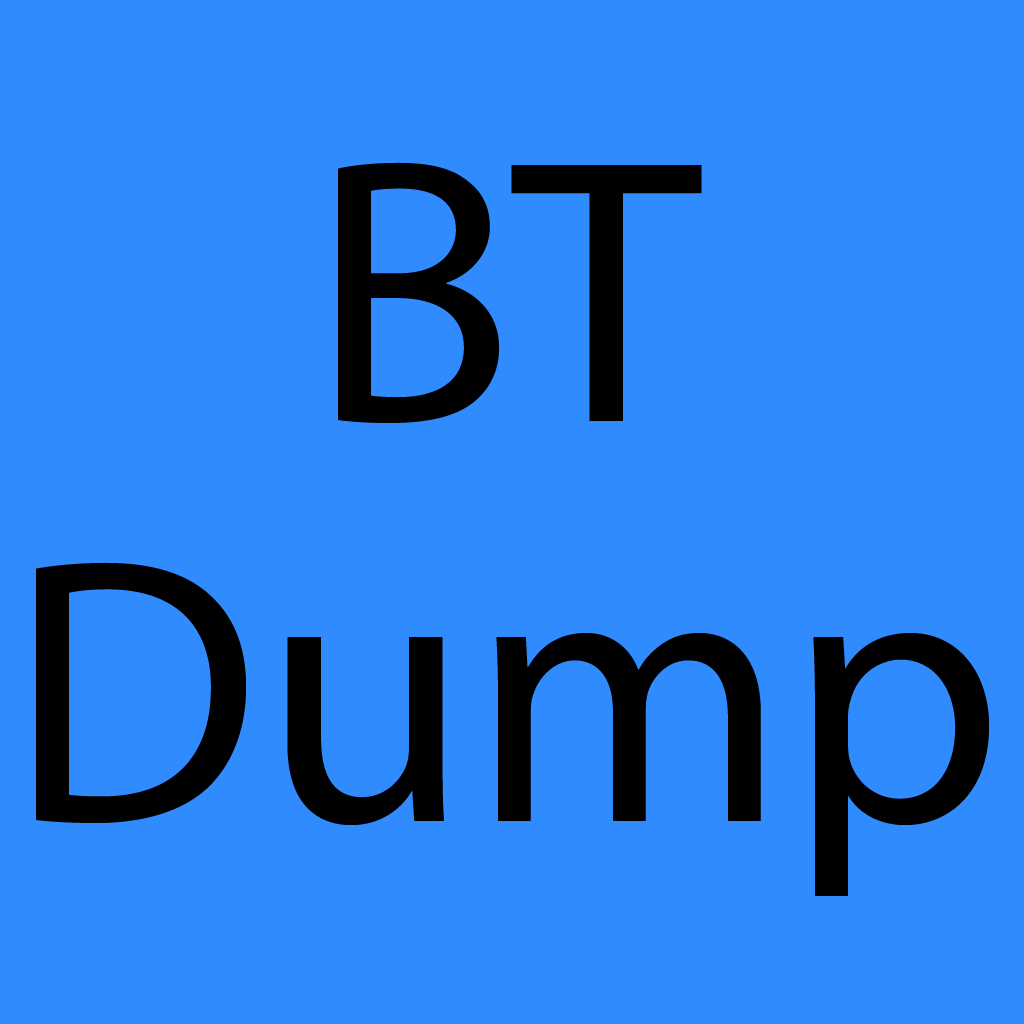
<style>
.page{position:relative;width:1024px;height:1024px;background:#2f8bfe}
.page>*{position:absolute;margin:0}
.t1{font:380px/400px "MyriadPro-Regular";color:#000000}
</style>
<div class="page">
<p class="t1" style="left:36px;top:162px;width:953px;height:734px;text-align:center">BT<br>Dump</p>
</div>
